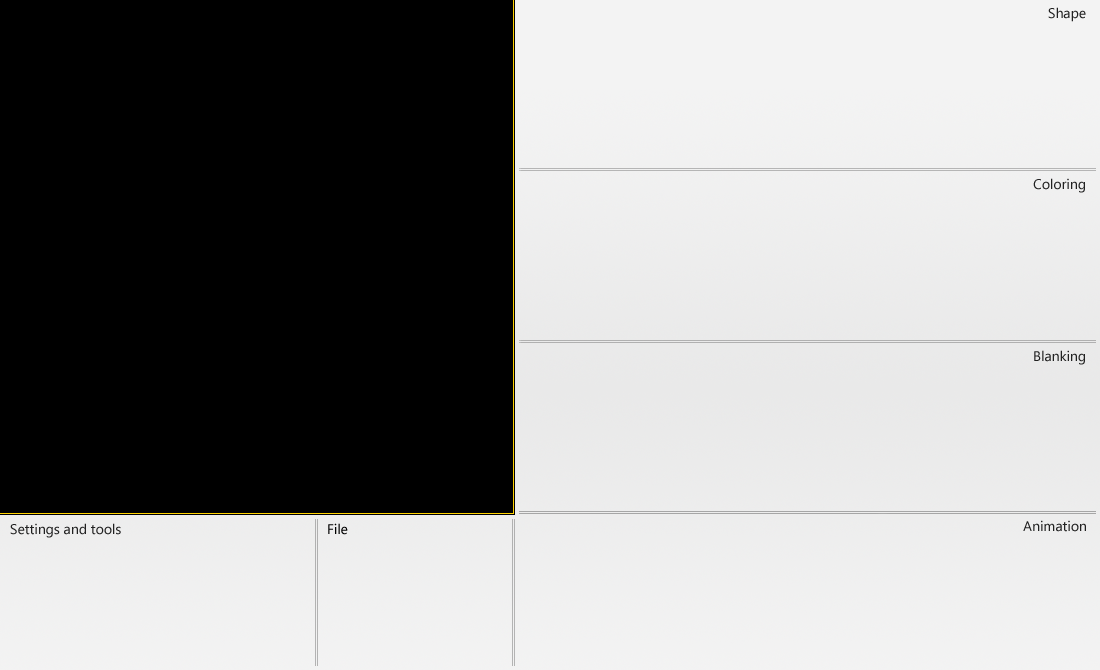
<style>
.page{position:relative;width:1100px;height:670px;background:#000000}
.page>*{position:absolute;margin:0}
.t1{font:14px "SegoeUI";color:#212121}
.t2{font:14px "SegoeUI";color:#000000}
</style>
<div class="page">
<p class="t1" style="left:1048px;top:7px;width:38px;height:15px">Shape</p>
<p class="t1" style="left:1033px;top:178px;width:52px;height:15px">Coloring</p>
<p class="t1" style="left:1034px;top:350px;width:51px;height:15px">Blanking</p>
<p class="t1" style="left:1023px;top:520px;width:63px;height:12px">Animation</p>
<p class="t1" style="left:10px;top:523px;width:111px;height:15px">Settings and tools</p>
<p class="t2" style="left:328px;top:523px;width:20px;height:12px">File</p>
</div>
